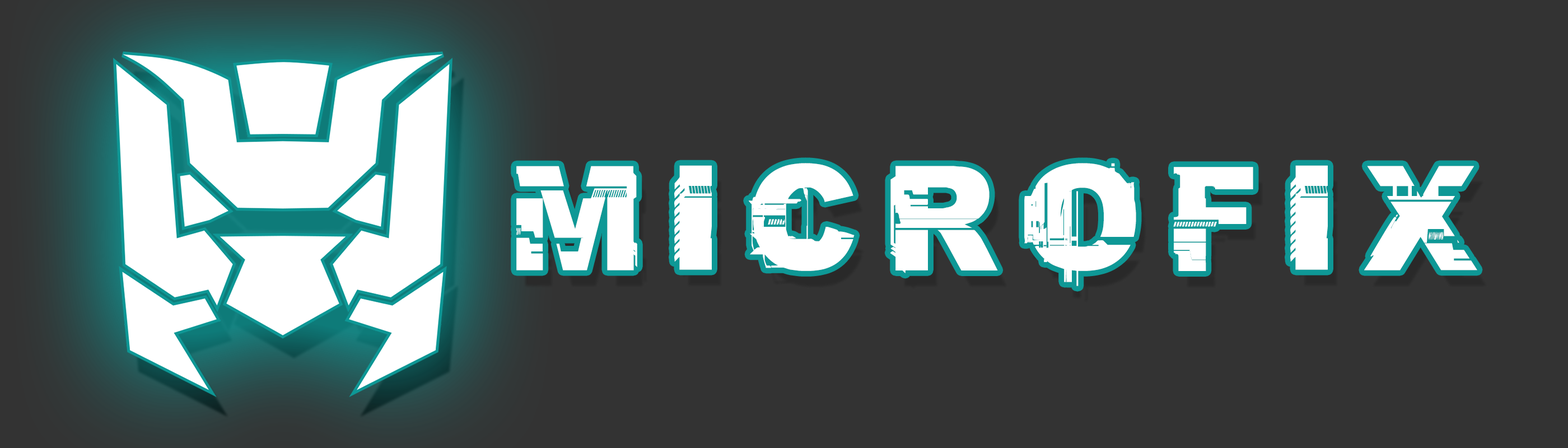
<style>
.page{position:relative;width:1568px;height:448px;background:#333333}
.page>*{position:absolute;margin:0}
.t1{font:132.6px "CFGlitchCity-Regular";letter-spacing:0.2em;color:#ffffff}
</style>
<div class="page">
<p class="t1" style="left:516px;top:163px;width:961px;height:123px">MICROFIX</p>
</div>
